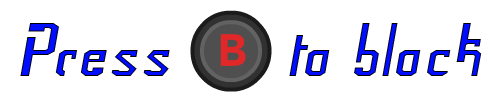
<style>
.page{position:relative;width:500px;height:100px;background:#ffffff}
.page>*{position:absolute;margin:0}
.t1{font:72px "Frak-Regular";color:#000dff}
</style>
<div class="page">
<p class="t1" style="left:20px;top:23px;width:150px;height:53px">Press</p>
<p class="t1" style="left:289px;top:23px;width:193px;height:53px">to block</p>
</div>
